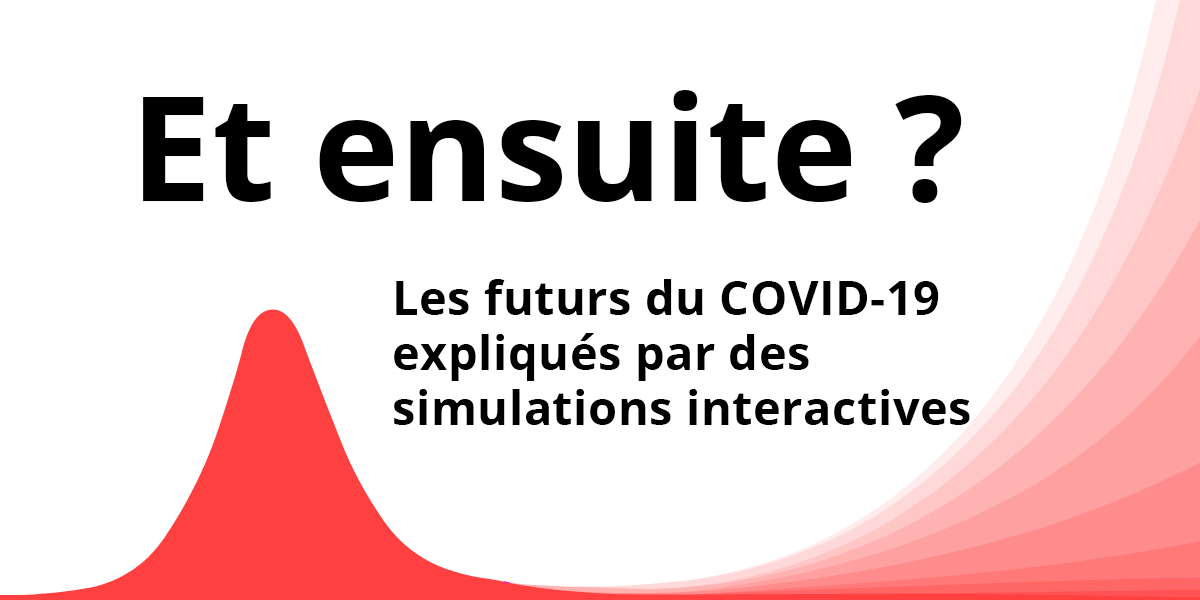
<style>
.page{position:relative;width:1200px;height:600px;background:#ffffff}
.page>*{position:absolute;margin:0}
.t1{font:250px "OpenSans-Bold";color:#000000}
.t2{font:80px/55px "OpenSans-Bold";letter-spacing:0.015em;color:#000000}
</style>
<div class="page">
<p class="t1" style="left:143px;top:90px;width:819px;height:113px">Et ensuite ?</p>
<p class="t2" style="left:394px;top:279px;width:576px;height:146px">Les futurs du COVID-19<br>expliqués par des<br>simulations interactives</p>
</div>
